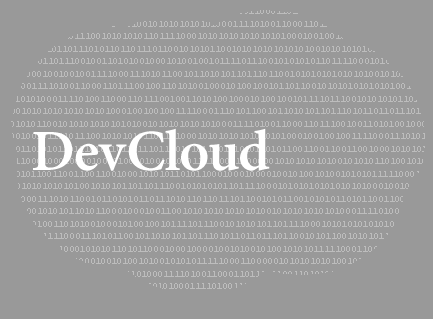
<style>
.page{position:relative;width:433px;height:319px;background:#999999}
.page>*{position:absolute;margin:0}
.t1{font:58.3px "MinionPro-Semibold";color:#ffffff}
</style>
<div class="page">
<p class="t1" style="left:33px;top:128px;width:237px;height:43px">DevCloud</p>
</div>
